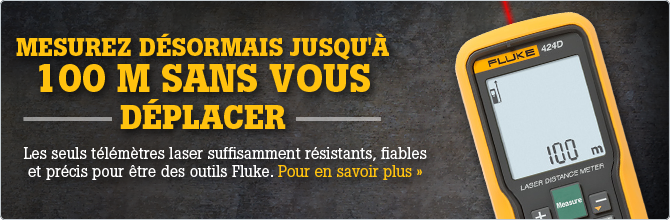
<style>
.page{position:relative;width:670px;height:220px}
.page>*{position:absolute;margin:0}
.t1{font:25px/40px "BotonPro-Bold";color:#ffc20e;text-transform:uppercase}
.t2{font:22px/40px "BotonPro-Bold";color:#ffc20e;text-transform:uppercase}
.t3{font:38px/36px "BotonPro-Bold";color:#ffc20e;text-transform:uppercase}
.t4{font:33.1px/37px "BotonPro-Bold";color:#ffc20e;text-transform:uppercase}
.t5{font:16px/18px "BotonPro-Regular";color:#ffffff}
.t6{font:16px/18px "BotonPro-Regular";color:#ffc20e}
</style>
<div class="page">
<p class="t1" style="left:16px;top:33px;width:373px;height:96px;text-align:center">Mesurez désormais jusqu'à                                                          <span class="t2">  <br></span><span class="t3">100 m sans vous<br></span><span class="t4">déplacer</span></p>
<p class="t5" style="left:23px;top:147px;width:404px;height:33px;text-align:center">Les seuls télémètres laser suffisamment résistants, fiables et précis pour être des outils Fluke. <span class="t6">Pour en savoir plus »</span></p>
</div>
